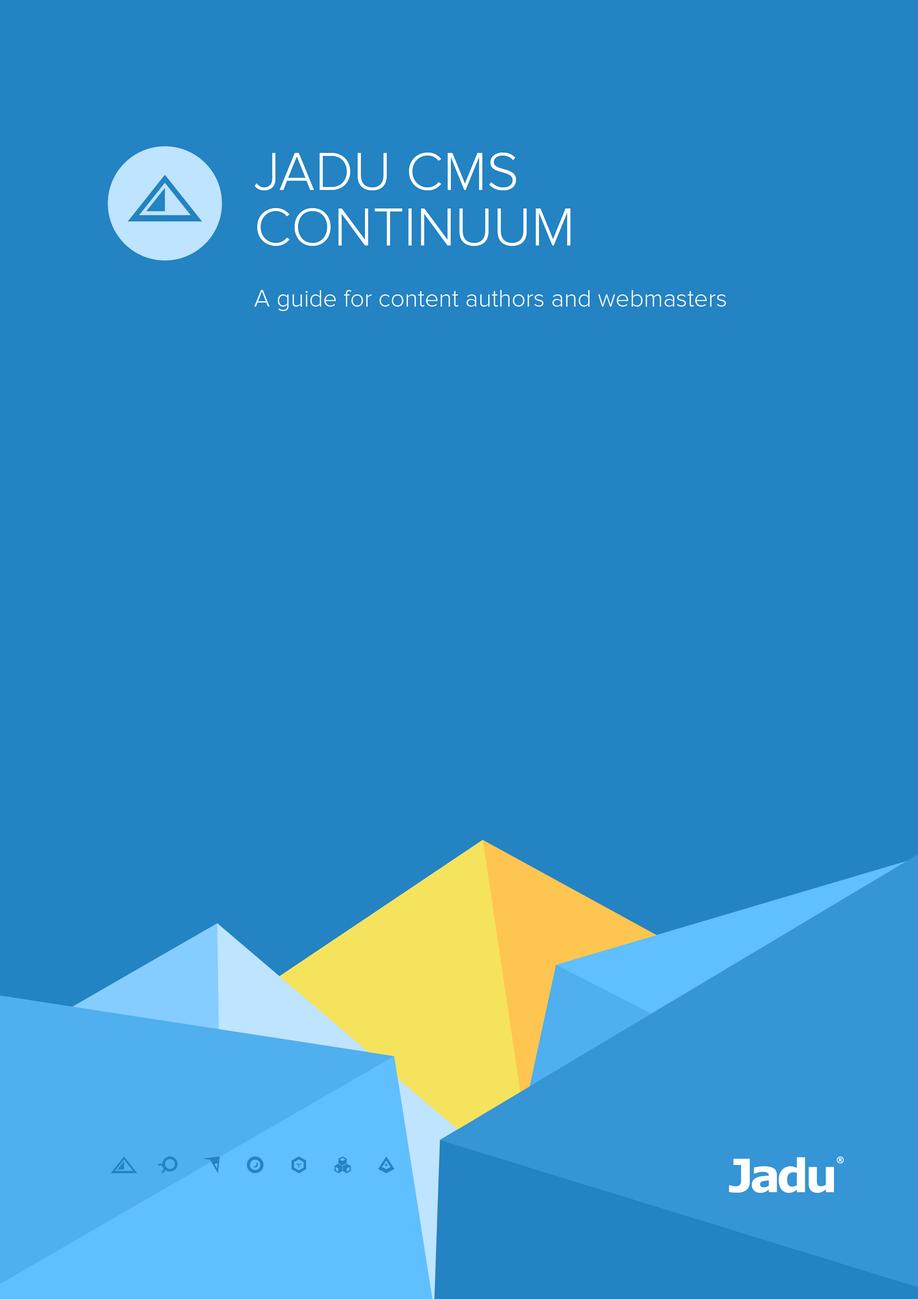
<style>
.page{position:relative;width:918px;height:1299px;background:#2383c3}
.page>*{position:absolute;margin:0}
.t1{font:24.7px/27.8px "ProximaNova-Light";color:#ffffff}
.t2{font:55.5px "ProximaNova-Light";color:#ffffff;text-transform:uppercase}
.t3{font:55.5px/55.5px "ProximaNova-Light";color:#ffffff;text-transform:uppercase}
</style>
<div class="page">
<p class="t1" style="left:254px;top:153px;width:472px;height:158px"><span class="t2">Jadu CMS </span><span class="t3"><br>Continuum<br><br></span>A guide for content authors and webmasters</p>
</div>
